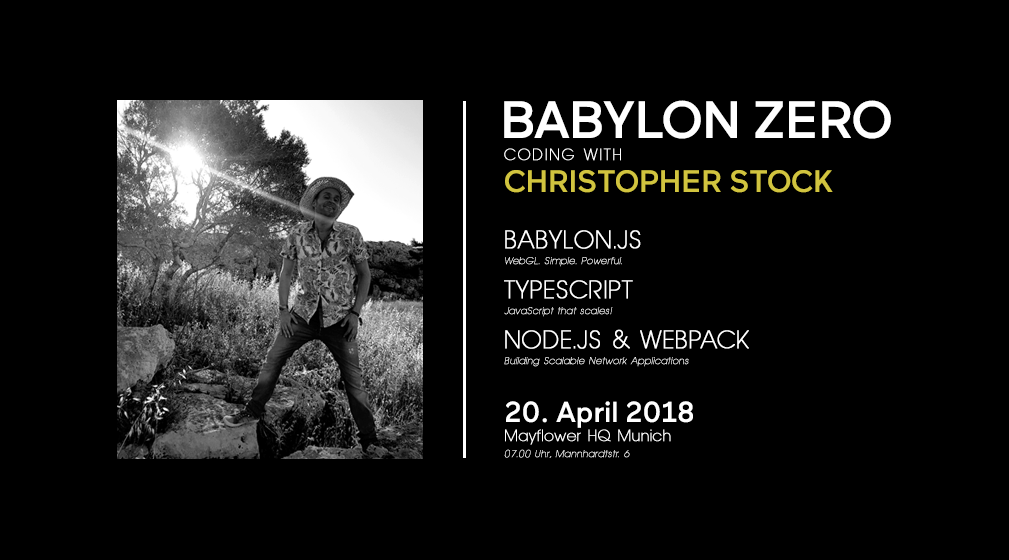
<style>
.page{position:relative;width:1009px;height:560px;background:#000000}
.page>*{position:absolute;margin:0}
.t1{font:10px/16px "AvantageSmallNormal";letter-spacing:0.02em;color:#ffffff;font-weight:bold;font-style:italic}
.t2{font:52.4px "Maax-Medium";letter-spacing:-0.02em;color:#ffffff}
.t3{font:16px/22px "AvantageSmallNormal";letter-spacing:0.1em;color:#ffffff;font-weight:bold}
.t4{font:31px/32px "Maax-Medium";letter-spacing:-0.01em;color:#d1c43f}
.t5{font:25px/24px "AvantageSmallNormal";letter-spacing:0.02em;color:#ffffff;font-weight:bold}
.t6{font:25px/34px "AvantageSmallNormal";letter-spacing:0.02em;color:#ffffff;font-weight:bold}
.t7{font:29px/58px "Maax-Medium";letter-spacing:-0.01em;color:#ffffff}
.t8{font:16px/19px "AvantageSmallNormal";letter-spacing:0.02em;color:#ffffff;font-weight:bold}
</style>
<div class="page">
<p class="t1" style="left:504px;top:100px;width:387px;height:358px"><span class="t2">BABYLON ZERO<br></span><span class="t3">CODING WITH<br></span><span class="t4">CHRISTOPHER STOCK<br><br></span><span class="t5">BABYLON.JS<br></span>WebGL. Simple. Powerful.<br><span class="t6">TYPESCRIPT<br></span>JavaScript that scales!<br><span class="t6">NODE.JS &amp; WEBPACK<br></span>Building Scalable Network Applications<br><span class="t7">20. April 2018<br></span><span class="t8">Mayflower HQ Munich<br></span>07.00 Uhr, Mannhardtstr. 6</p>
</div>
